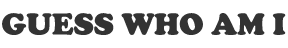
<style>
.page{position:relative;width:288px;height:48px;background:#ffffff}
.page>*{position:absolute;margin:0}
.t1{font:31.2px "CooperBlack";color:#333333}
</style>
<div class="page">
<p class="t1" style="left:2px;top:13px;width:284px;height:22px">GUESS WHO AM I</p>
</div>
